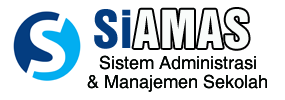
<style>
.page{position:relative;width:285px;height:100px;background:#ffffff}
.page>*{position:absolute;margin:0}
.t1{font:48px "HelveticaInseratLT-Roman";color:#043d80}
.t2{font:48px "HelveticaInseratLT-Roman";color:#f9fcfa}
.t3{font:18px "Helvetica";color:#000402}
</style>
<div class="page">
<p class="t1" style="left:94px;top:9px;width:37px;height:40px">Si</p>
<p class="t2" style="left:133px;top:9px;width:116px;height:40px">AMAS</p>
<p class="t3" style="left:99px;top:55px;width:157px;height:15px">Sistem Administrasi</p>
<p class="t3" style="left:99px;top:55px;width:157px;height:15px">Sistem Administrasi</p>
<p class="t3" style="left:87px;top:74px;width:180px;height:18px">&amp; Manajemen Sekolah</p>
<p class="t3" style="left:87px;top:74px;width:180px;height:18px">&amp; Manajemen Sekolah</p>
</div>
